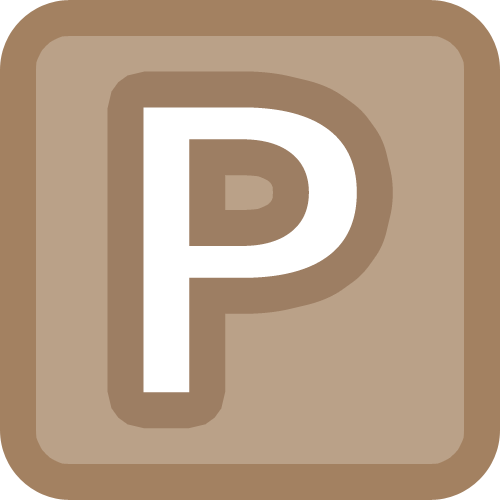
<style>
.page{position:relative;width:500px;height:500px;background:#baa188}
.page>*{position:absolute;margin:0}
.t1{font:390.4px "Menlo-Regular";color:#ffffff;scale:1.18 1}
</style>
<div class="page">
<p class="t1" style="left:143px;top:107px;width:214px;height:286px">P</p>
</div>
